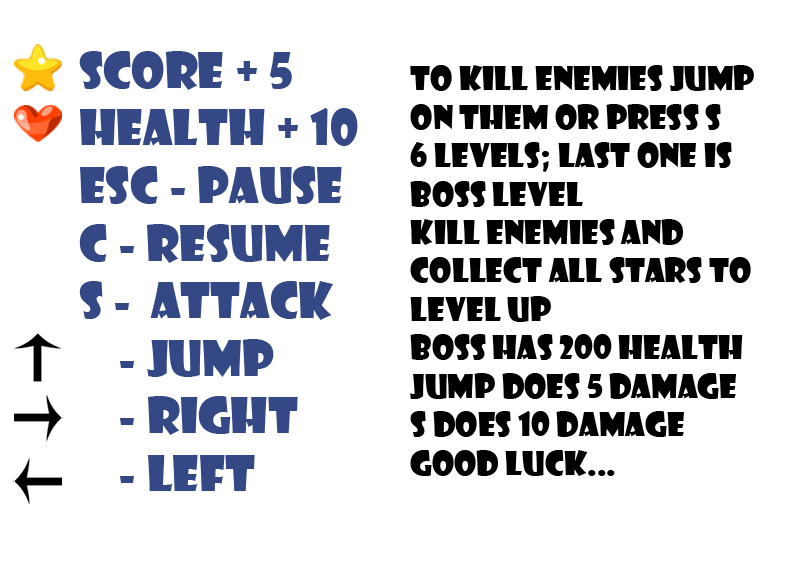
<style>
.page{position:relative;width:800px;height:580px;background:#ffffff}
.page>*{position:absolute;margin:0}
.t1{font:48px "ShowcardGothic-Reg";color:#334884}
.t2{font:32px "ShowcardGothic-Reg";color:#000000}
</style>
<div class="page">
<p class="t1" style="left:79px;top:51px;width:279px;height:440px">Score + 5<br>health + 10<br>esc - pause<br>c - resume<br>s - Attack<br>    - Jump<br>    - right<br>    - left</p>
<p class="t2" style="left:410px;top:65px;width:344px;height:411px">To kill enemies jump <br>on them or press s<br>6 levels; last one is <br>boss level<br>kill enemies and <br>collect all stars to<br>level up<br>boss has 200 health<br>jump does 5 damage<br>s does 10 damage<br>GOOd luck...</p>
</div>
